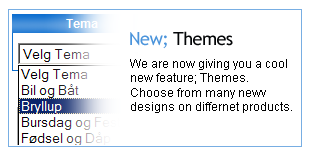
<style>
.page{position:relative;width:309px;height:155px;background:#ffffff}
.page>*{position:absolute;margin:0}
.t1{font:18px "TrebuchetMS";letter-spacing:-0.025em;color:#040608}
.t2{font:18px "TrebuchetMS";letter-spacing:-0.025em;color:#4b94db}
.t3{font:12px "ArialMT";color:#000000}
</style>
<div class="page">
<p class="t1" style="left:130px;top:31px;width:103px;height:18px"><span class="t2">New;</span> Themes</p>
<p class="t3" style="left:130px;top:59px;width:162px;height:54px">We are now giving you a cool<br>new feature; Themes.<br>Choose from many newv <br>designs on differnet products.</p>
</div>
